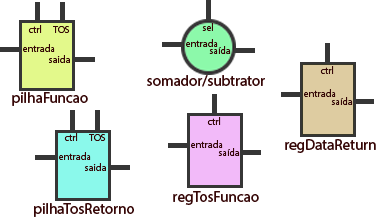
<style>
.page{position:relative;width:377px;height:220px;background:#ffffff}
.page>*{position:absolute;margin:0}
.t1{font:10px "MyriadHebrew-Regular";color:#370707}
.t2{font:15px "MyriadHebrew-Regular";color:#370707}
.t3{font:15px "MyriadHebrew-Regular";color:#360707}
</style>
<div class="page">
<p class="t1" style="left:28px;top:25px;width:14px;height:8px">ctrl</p>
<p class="t1" style="left:53px;top:26px;width:17px;height:7px">TOS</p>
<p class="t1" style="left:202px;top:23px;width:11px;height:8px">sel</p>
<p class="t1" style="left:186px;top:39px;width:32px;height:8px">entrada</p>
<p class="t1" style="left:23px;top:44px;width:32px;height:8px">entrada</p>
<p class="t1" style="left:209px;top:46px;width:22px;height:8px">saída</p>
<p class="t1" style="left:49px;top:55px;width:21px;height:8px">saida</p>
<p class="t2" style="left:147px;top:75px;width:118px;height:12px">somador/subtrator</p>
<p class="t1" style="left:320px;top:66px;width:14px;height:8px">ctrl</p>
<p class="t1" style="left:304px;top:89px;width:32px;height:8px">entrada</p>
<p class="t3" style="left:12px;top:92px;width:76px;height:14px">pilhaFuncao</p>
<p class="t1" style="left:331px;top:97px;width:22px;height:8px">saída</p>
<p class="t1" style="left:207px;top:117px;width:14px;height:8px">ctrl</p>
<p class="t1" style="left:64px;top:133px;width:14px;height:8px">ctrl</p>
<p class="t1" style="left:89px;top:134px;width:17px;height:7px">TOS</p>
<p class="t1" style="left:191px;top:140px;width:32px;height:8px">entrada</p>
<p class="t1" style="left:218px;top:148px;width:22px;height:8px">saída</p>
<p class="t3" style="left:285px;top:139px;width:91px;height:14px">regDataReturn</p>
<p class="t1" style="left:59px;top:152px;width:32px;height:8px">entrada</p>
<p class="t1" style="left:85px;top:163px;width:21px;height:8px">saida</p>
<p class="t3" style="left:173px;top:191px;width:86px;height:14px">regTosFuncao</p>
<p class="t3" style="left:34px;top:203px;width:100px;height:14px">pilhaTosRetorno</p>
</div>
